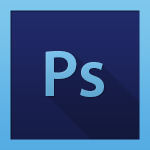
<style>
.page{position:relative;width:150px;height:150px}
.page>*{position:absolute;margin:0}
.t1{font:67.5px "MyriadPro-Semibold";color:#6abae8}
</style>
<div class="page">
<p class="t1" style="left:45px;top:51px;width:59px;height:46px">Ps</p>
</div>
